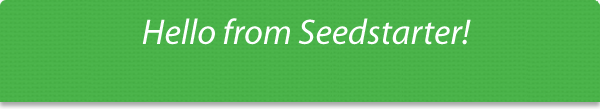
<style>
.page{position:relative;width:600px;height:110px}
.page>*{position:absolute;margin:0}
.t1{font:36px "MyriadPro-It";color:#feffff}
</style>
<div class="page">
<p class="t1" style="left:142px;top:18px;width:329px;height:27px">Hello from Seedstarter!</p>
</div>
